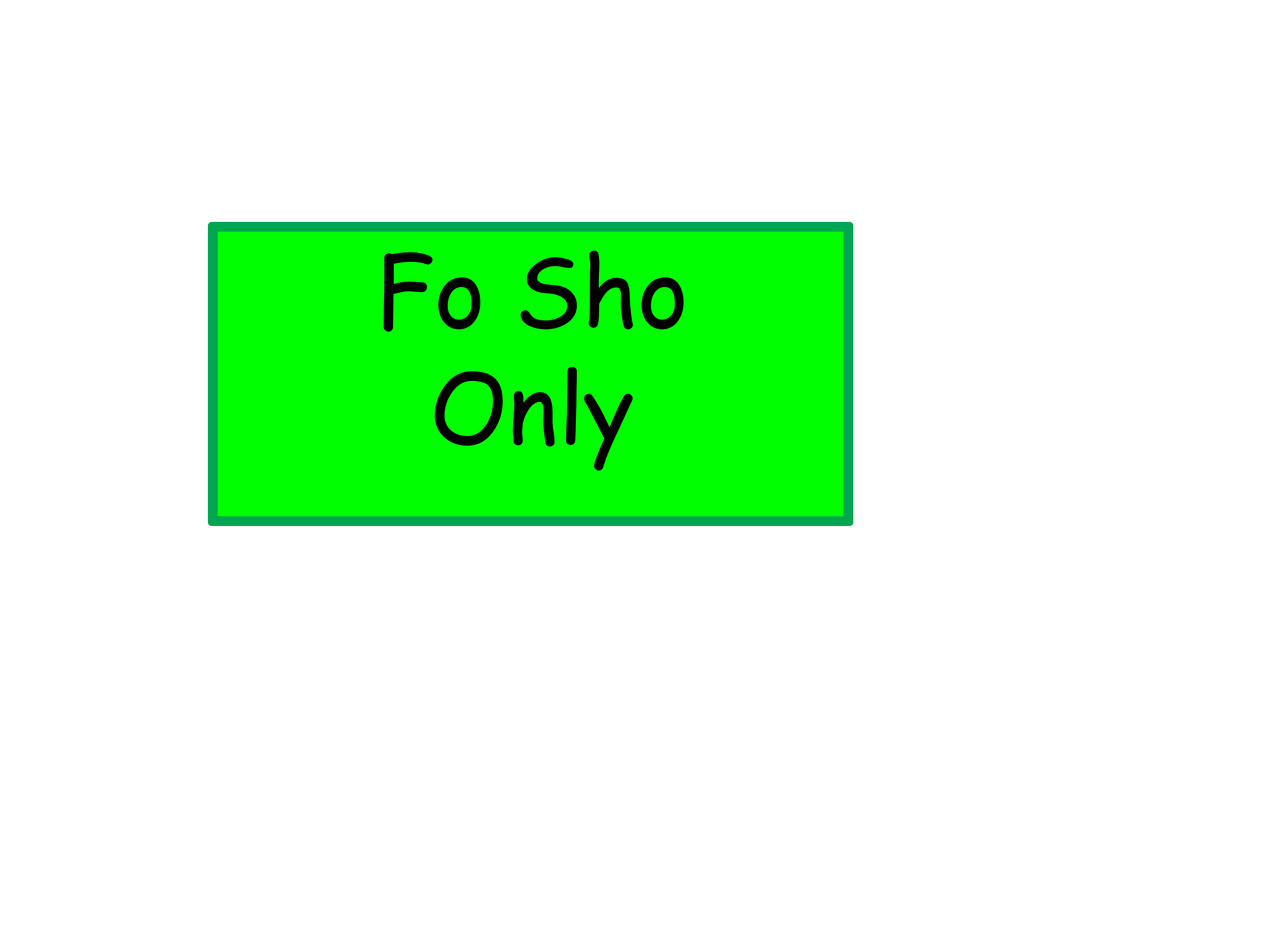
<style>
.page{position:relative;width:1280px;height:931px;background:#ffffff}
.page>*{position:absolute;margin:0}
.t1{font:97px "ComicSansMS";color:#000000}
</style>
<div class="page">
<p class="t1" style="left:384px;top:250px;width:300px;height:221px;text-align:center">Fo Sho<br>Only</p>
</div>
